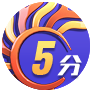
<style>
.page{position:relative;width:92px;height:92px;background:#ffffff}
.page>*{position:absolute;margin:0}
.t1{font:45.6px "Helvetica-Roman-SemiB";letter-spacing:-0.075em;font-style:italic;scale:1.05 1}
.t2{font:21.6px "RuixianSunHeiHeavyGB1.0";letter-spacing:-0.075em;color:#ffffff;font-style:italic;scale:1.11 1}
</style>
<div class="page">
<p class="t1" style="left:32px;top:41px;width:24px;height:34px">5</p>
<p class="t2" style="left:57px;top:55px;width:25px;height:21px">分</p>
</div>
